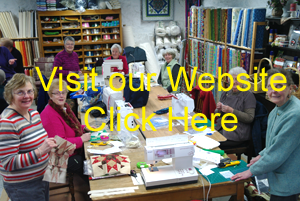
<style>
.page{position:relative;width:300px;height:201px}
.page>*{position:absolute;margin:0}
.t1{font:33.8px "ArialMT";color:#fff100}
</style>
<div class="page">
<p class="t1" style="left:35px;top:66px;width:252px;height:66px;text-align:center">Visit our Website<br>Click Here</p>
</div>
